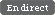
<style>
.page{position:relative;width:55px;height:15px;background:#646567}
.page>*{position:absolute;margin:0}
.t1{font:9px "Georgia";color:#ffffff}
</style>
<div class="page">
<p class="t1" style="left:7px;top:4px;width:41px;height:7px">En direct</p>
</div>
